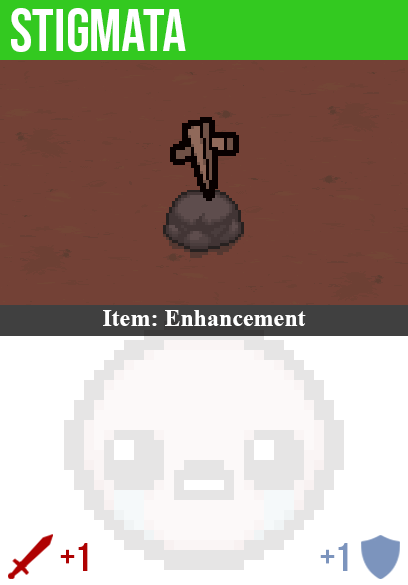
<style>
.page{position:relative;width:408px;height:585px;background:#734136}
.page>*{position:absolute;margin:0}
.t1{font:60px "BebasNeue-Regular";color:#ffffff}
.t2{font:24px "TimesNewRomanPS-BoldMT";color:#ffffff}
.t3{font:40px "BebasNeue-Regular";color:#af0202}
.t4{font:40px "BebasNeue-Regular";color:#7c94bd}
</style>
<div class="page">
<p class="t1" style="left:11px;top:8px;width:175px;height:44px">stigmata</p>
<p class="t2" style="left:103px;top:310px;width:203px;height:16px">Item: Enhancement</p>
<p class="t3" style="left:60px;top:543px;width:28px;height:28px">+1</p>
<p class="t4" style="left:320px;top:543px;width:28px;height:28px">+1</p>
</div>
